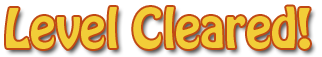
<style>
.page{position:relative;width:322px;height:57px;background:#ffffff}
.page>*{position:absolute;margin:0}
.t1{font:48px "HoboStd";color:#f2cd38}
</style>
<div class="page">
<p class="t1" style="left:6px;top:6px;width:304px;height:43px">Level Cleared!</p>
</div>
